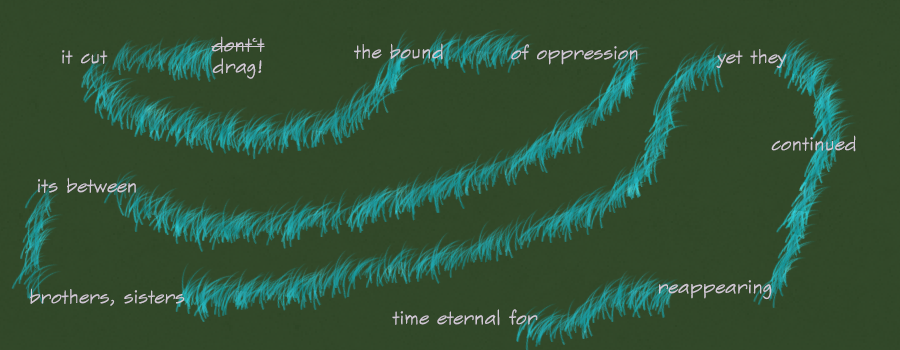
<style>
.page{position:relative;width:900px;height:350px;background:#324829}
.page>*{position:absolute;margin:0}
.t1{font:18px "SketchFlowPrint";color:#d1c8d4}
</style>
<div class="page">
<p class="t1" style="left:211px;top:36px;width:54px;height:43px;text-align:center">dont‘t<br>drag!</p>
<p class="t1" style="left:62px;top:50px;width:46px;height:14px">it cut</p>
<p class="t1" style="left:354px;top:43px;width:89px;height:17px">the bound</p>
<p class="t1" style="left:511px;top:44px;width:127px;height:21px">of oppression</p>
<p class="t1" style="left:716px;top:49px;width:71px;height:19px">yet they</p>
<p class="t1" style="left:771px;top:135px;width:85px;height:17px">continued</p>
<p class="t1" style="left:38px;top:177px;width:98px;height:16px">its between</p>
<p class="t1" style="left:659px;top:280px;width:113px;height:20px">reappearing</p>
<p class="t1" style="left:30px;top:288px;width:155px;height:18px">brothers, sisters</p>
<p class="t1" style="left:392px;top:309px;width:146px;height:17px">time eternal for</p>
</div>
